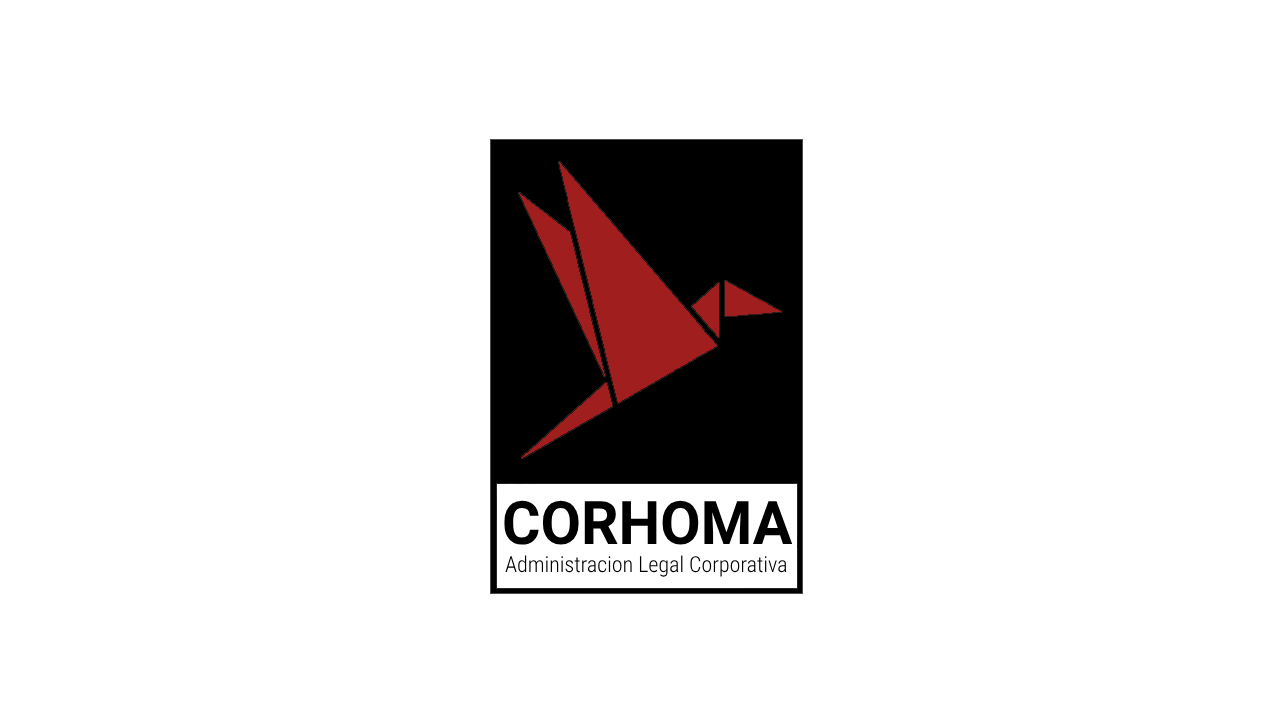
<style>
.page{position:relative;width:1280px;height:720px;background:#ffffff}
.page>*{position:absolute;margin:0}
.t1{font:60px "Roboto-Bold";color:#000000}
.t2{font:22px "RobotoCondensed-Light";color:#000000}
</style>
<div class="page">
<p class="t1" style="left:504px;top:500px;width:289px;height:45px">CORHOMA</p>
<p class="t2" style="left:505px;top:555px;width:282px;height:22px">Administracion Legal Corporativa</p>
</div>
